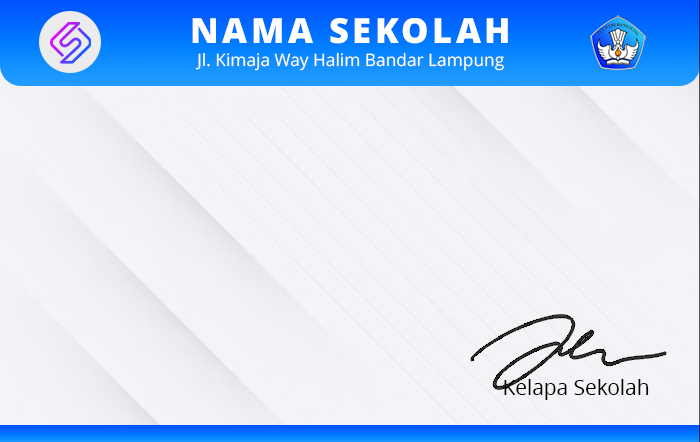
<style>
.page{position:relative;width:700px;height:442px}
.page>*{position:absolute;margin:0}
.t1{font:34.6px "OpenSans-Extrabold";letter-spacing:0.1em;color:#ffffff;text-transform:uppercase}
.t2{font:17.3px "OpenSans";color:#ffffff}
.t3{font:20.8px "OpenSans";color:#000000}
</style>
<div class="page">
<p class="t1" style="left:192px;top:18px;width:316px;height:26px">NAMA SEKOLAH</p>
<p class="t2" style="left:195px;top:52px;width:309px;height:19px">Jl. Kimaja Way Halim Bandar Lampung</p>
<p class="t3" style="left:504px;top:379px;width:145px;height:21px">Kelapa Sekolah</p>
</div>
